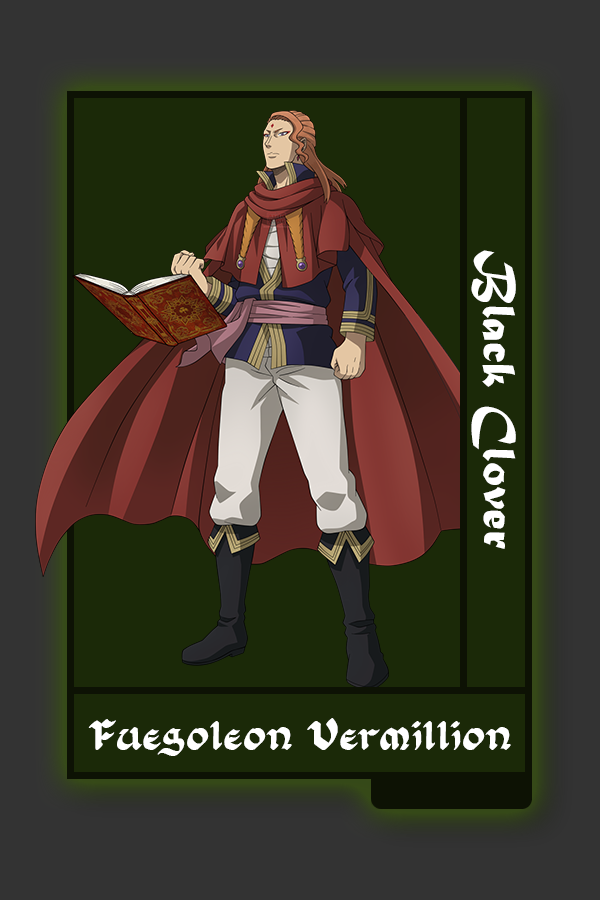
<style>
.page{position:relative;width:600px;height:900px;background:#1b2908}
.page>*{position:absolute;margin:0}
.t1{font:48.8px "MaturaMTScriptCapitals";color:#ffffff}
.t2{font:35.1px "FloranteatLaura";color:#ffffff}
</style>
<div class="page">
<p class="t1" style="left:471px;top:250px;width:45px;height:299px;rotate:90deg">Black Clover</p>
<p class="t2" style="left:88px;top:718px;width:423px;height:38px">Fuegoleon Vermillion</p>
</div>
